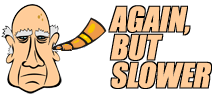
<style>
.page{position:relative;width:221px;height:95px;background:#ffffff}
.page>*{position:absolute;margin:0}
.t1{font:31px/28px "Impact";color:#ffcc99;font-style:italic}
</style>
<div class="page">
<p class="t1" style="left:109px;top:6px;width:102px;height:82px">AGAIN,<br>BUT<br>SLOWER</p>
</div>
